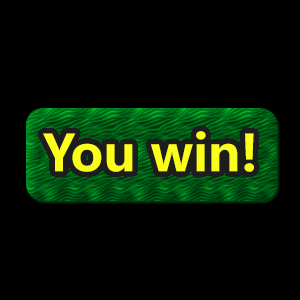
<style>
.page{position:relative;width:300px;height:300px;background:#000001}
.page>*{position:absolute;margin:0}
.t1{font:12px "MicrosoftYaHei-Bold";color:#f0f311}
</style>
<div class="page">
<p class="t1" style="left:43px;top:131px;width:211px;height:41px">You win!</p>
</div>
